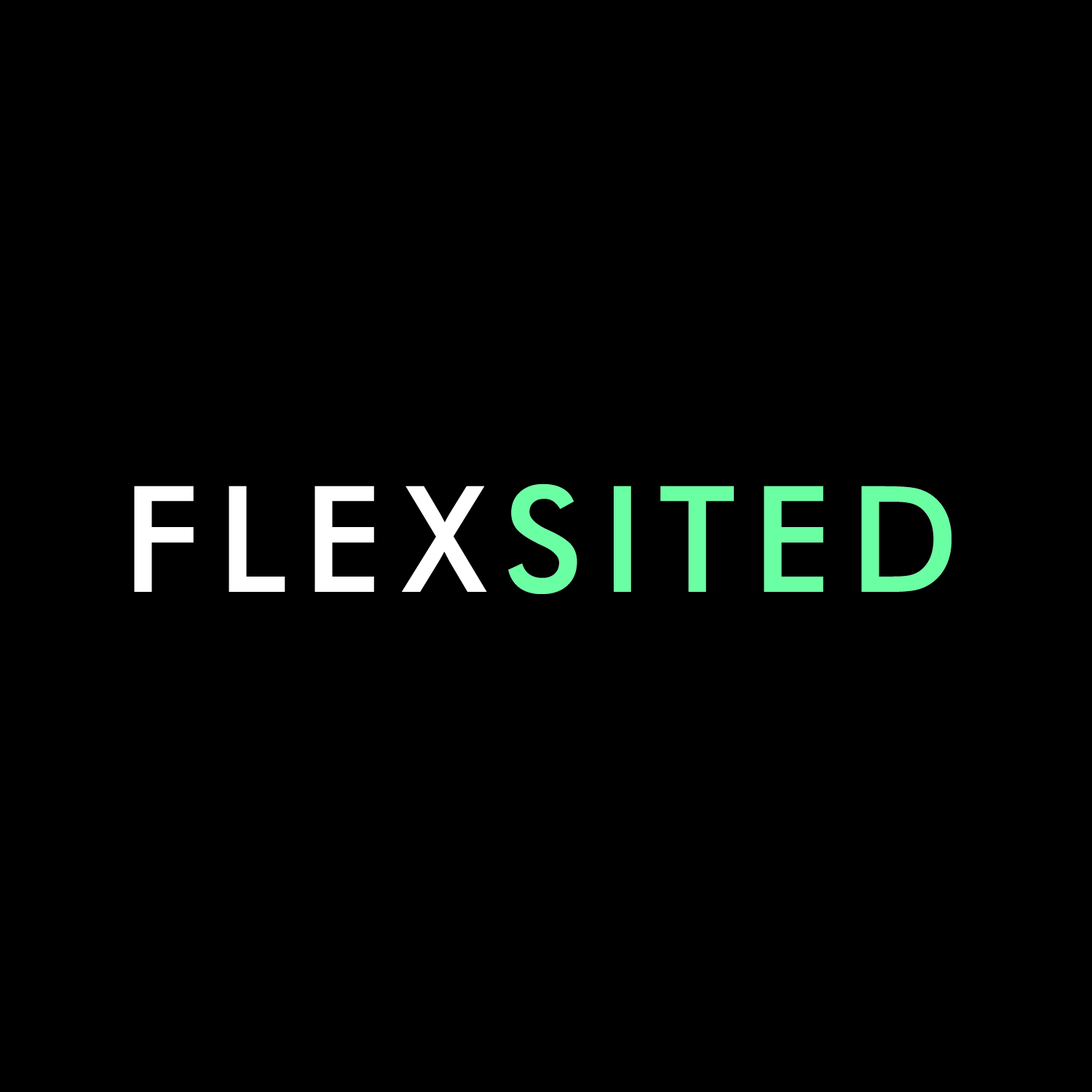
<style>
.page{position:relative;width:1092px;height:1092px;background:#000000}
.page>*{position:absolute;margin:0}
.t1{font:147.9px "FuturaBT-Medium";letter-spacing:0.12em;color:#6bffa3}
.t2{font:147.9px "FuturaBT-Medium";letter-spacing:0.12em;color:#ffffff}
</style>
<div class="page">
<p class="t1" style="left:134px;top:483px;width:817px;height:111px"><span class="t2">FLEX</span>SITED</p>
</div>
